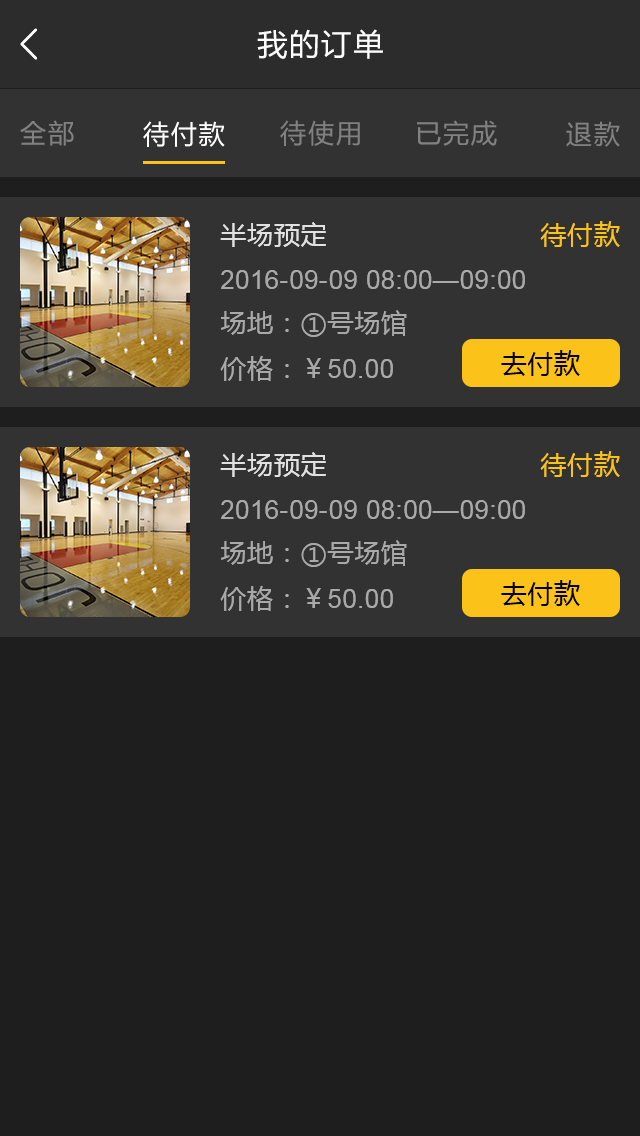
<style>
.page{position:relative;width:640px;height:1136px;background:#1e1e1e}
.page>*{position:absolute;margin:0}
.t1{font:30px "MicrosoftYaHei";letter-spacing:0.07em;color:#ffffff}
.t2{font:26px "MicrosoftYaHei";letter-spacing:0.07em;color:#818181}
.t3{font:26px "MicrosoftYaHei";letter-spacing:0.07em;color:#ffffff}
.t4{font:26px "MicrosoftYaHei";letter-spacing:0.03em;color:#e1e1e1}
.t5{font:26px "MicrosoftYaHei";letter-spacing:0.03em;color:#fbc219}
.t6{font:26px "ArialMT";letter-spacing:0.03em;color:#a9a9a9}
.t7{font:26px "MicrosoftYaHei";letter-spacing:0.03em;color:#a9a9a9}
.t8{font:26px "MicrosoftYaHei";letter-spacing:0.03em;color:#010101}
</style>
<div class="page">
<p class="t1" style="left:257px;top:29px;width:126px;height:30px">我的订单</p>
<p class="t2" style="left:20px;top:120px;width:54px;height:26px">全部</p>
<p class="t3" style="left:143px;top:121px;width:82px;height:26px">待付款</p>
<p class="t2" style="left:280px;top:120px;width:80px;height:26px">待使用</p>
<p class="t2" style="left:417px;top:120px;width:80px;height:26px">已完成</p>
<p class="t2" style="left:566px;top:121px;width:54px;height:26px">退款</p>
<p class="t4" style="left:220px;top:222px;width:106px;height:25px">半场预定</p>
<p class="t5" style="left:540px;top:221px;width:80px;height:26px">待付款</p>
<p class="t6" style="left:221px;top:270px;width:304px;height:19px">2016-09-09 08:00—09:00</p>
<p class="t7" style="left:220px;top:310px;width:187px;height:27px">场地：①号场馆</p>
<p class="t8" style="left:501px;top:350px;width:79px;height:26px">去付款</p>
<p class="t6" style="left:220px;top:355px;width:173px;height:26px"><span class="t7">价格：￥</span>50.00</p>
<p class="t4" style="left:220px;top:452px;width:106px;height:25px">半场预定</p>
<p class="t5" style="left:540px;top:451px;width:80px;height:26px">待付款</p>
<p class="t6" style="left:221px;top:500px;width:304px;height:19px">2016-09-09 08:00—09:00</p>
<p class="t7" style="left:220px;top:540px;width:187px;height:27px">场地：①号场馆</p>
<p class="t8" style="left:501px;top:580px;width:79px;height:26px">去付款</p>
<p class="t6" style="left:220px;top:585px;width:173px;height:26px"><span class="t7">价格：￥</span>50.00</p>
</div>
